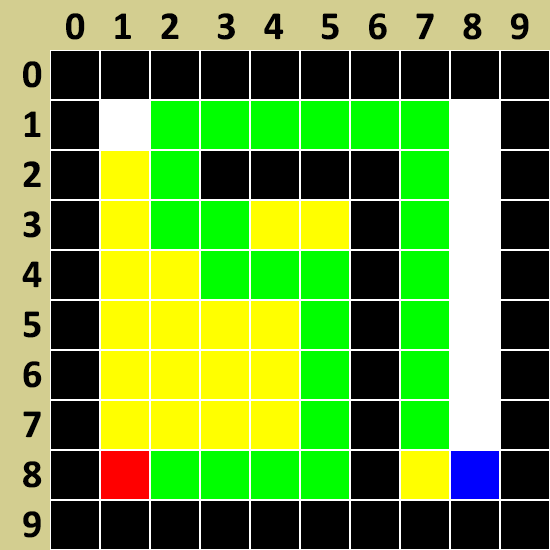
<style>
.page{position:relative;width:550px;height:550px;background:#000000}
.page>*{position:absolute;margin:0}
.t1{font:40px "Calibri-Bold";color:#000000}
.t2{font:40px/50px "Calibri-Bold";color:#000000}
</style>
<div class="page">
<p class="t1" style="left:66px;top:13px;width:463px;height:27px">0   1   2    3   4    5   6   7   8   9</p>
<p class="t2" style="left:22px;top:61px;width:20px;height:477px">0<br>1<br>2<br>3<br>4<br>5<br>6<br>7<br>8<br>9</p>
</div>
